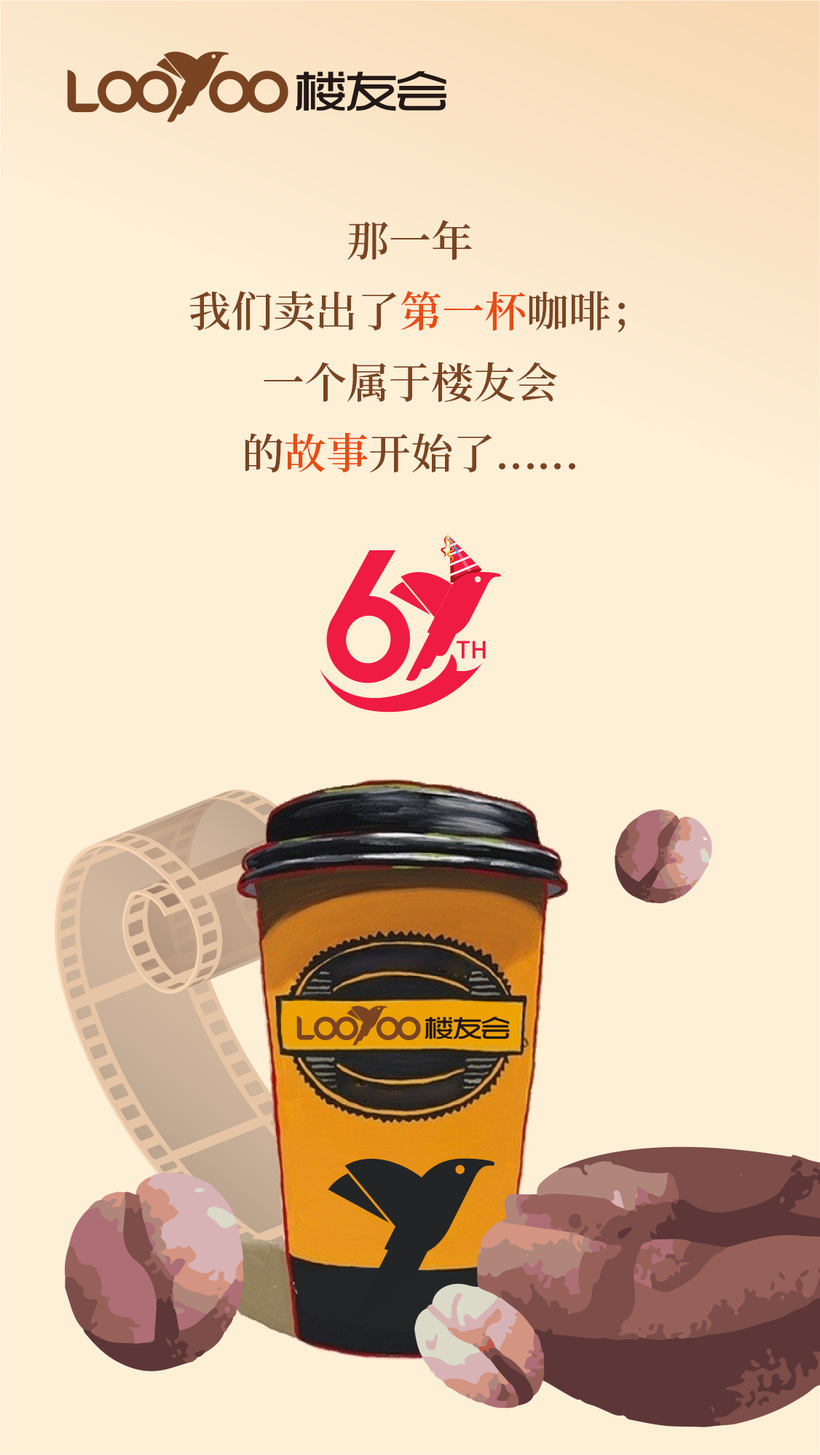
<style>
.page{position:relative;width:820px;height:1455px;background:#feefd7}
.page>*{position:absolute;margin:0}
.t1{font:42.2px/70.9px "SourceHanSerifSC-SemiBold";color:#7a4422}
.t2{font:42.2px/70.9px "SourceHanSerifSC-SemiBold";color:#e84c14}
</style>
<div class="page">
<p class="t1" style="left:190px;top:220px;width:434px;height:252px;text-align:center">那一年<br>我们卖出了<span class="t2">第一杯</span>咖啡；<br>一个属于楼友会<br>的<span class="t2">故事</span>开始了……</p>
</div>
